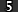
<style>
.page{position:relative;width:18px;height:12px;background:#333333}
.page>*{position:absolute;margin:0}
.t1{font:17px "Perpetua-Bold";color:#ffffff}
</style>
<div class="page">
<p class="t1" style="left:5px;top:1px;width:7px;height:10px">5</p>
</div>
